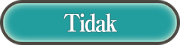
<style>
.page{position:relative;width:180px;height:45px;background:#239e9f}
.page>*{position:absolute;margin:0}
.t1{font:24px "RyuminPro-ExBold";letter-spacing:-0.08em;color:#ffffff;scale:0.9 1}
</style>
<div class="page">
<p class="t1" style="left:63px;top:13px;width:54px;height:19px">Tidak</p>
</div>
